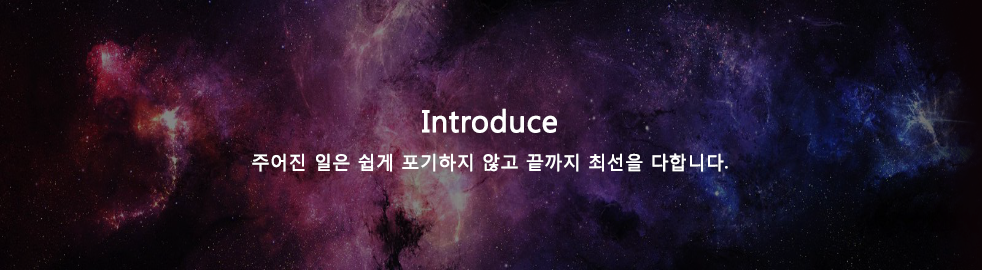
<style>
.page{position:relative;width:982px;height:270px}
.page>*{position:absolute;margin:0}
.t1{font:18px/36px "MalgunGothicRegular";color:#ffffff;font-weight:bold}
.t2{font:30px/36px "MalgunGothicRegular";color:#ffffff;font-weight:bold}
</style>
<div class="page">
<p class="t1" style="left:252px;top:108px;width:476px;height:64px;text-align:center"><span class="t2">Introduce<br></span>주어진 일은 쉽게 포기하지 않고 끝까지 최선을 다합니다.</p>
</div>
